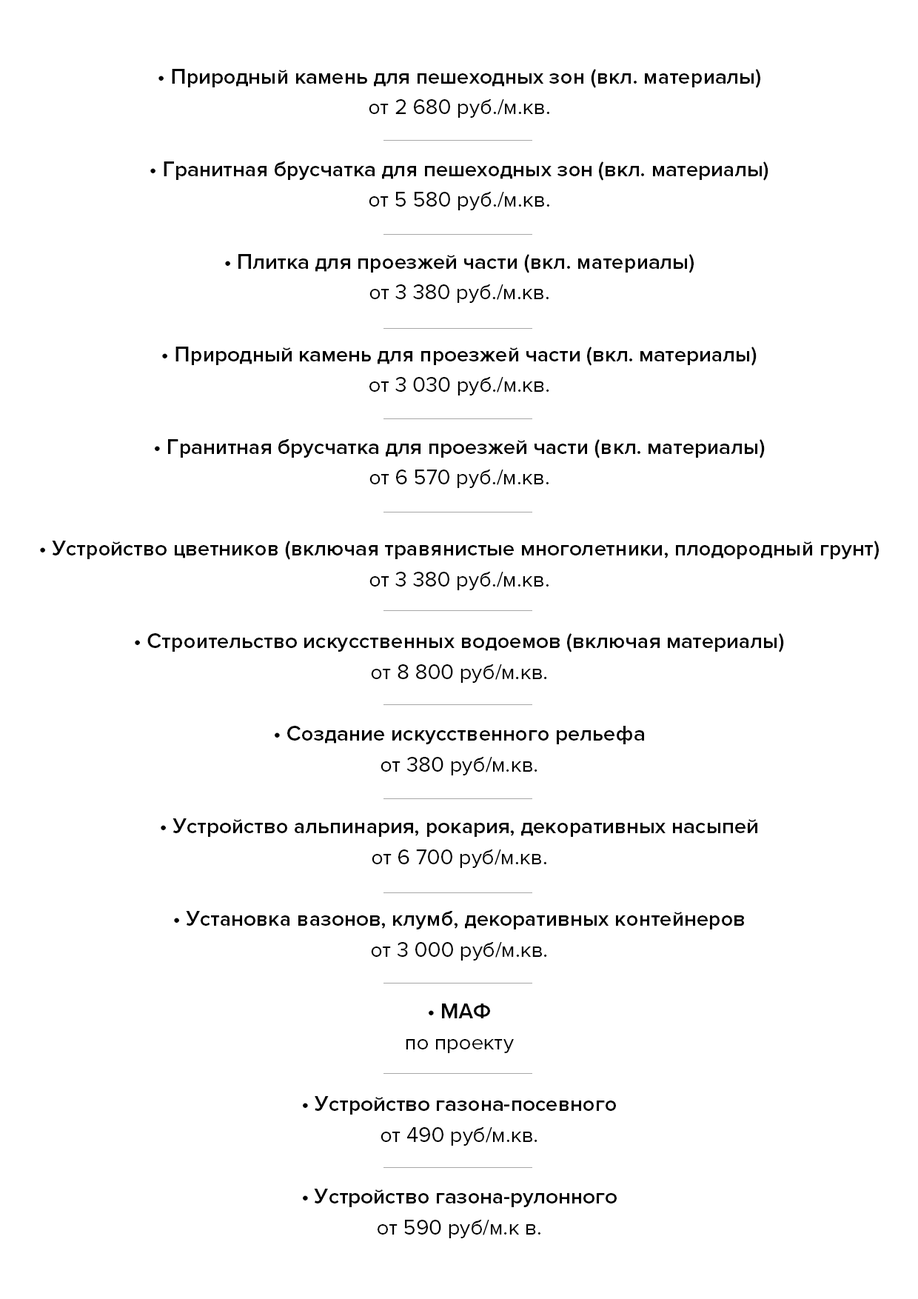
<style>
.page{position:relative;width:918px;height:1299px;background:#ffffff}
.page>*{position:absolute;margin:0}
.t1{font:21.6px/30.9px "ProximaNova-Semibold";color:#000000}
.t2{font:21.6px/30.9px "ProximaNova-Regular";color:#000000}
</style>
<div class="page">
<p class="t1" style="left:40px;top:541px;width:839px;height:697px;text-align:center">• Устройство цветников (включая травянистые многолетники, плодородный грунт)<br><span class="t2">от 3 380 руб./м.кв.<br><br></span>• Строительство искусственных водоемов (включая материалы)<br><span class="t2">от 8 800 руб/м.кв.<br><br></span>• Создание искусственного рельефа<br><span class="t2">от 380 руб/м.кв.<br><br></span>• Устройство альпинария, рокария, декоративных насыпей<br><span class="t2">от 6 700 руб/м.кв.<br><br></span>• Установка вазонов, клумб, декоративных контейнеров<br><span class="t2">от 3 000 руб/м.кв.<br><br></span>• МАФ<br><span class="t2">по проекту<br><br></span>• Устройство газона-посевного<br><span class="t2">от 490 руб/м.кв.<br><br></span>• Устройство газона-рулонного<br><span class="t2">от 590 руб/м.к в.<br><br></span>• Посадка деревьев и кустарников<br>(работа, посадочный грунт, удобрения, полив, гарантия 1 год)<br><span class="t2">посадка от 25% от стоимости растения<br>гарантия 1 год от 25% от стоимости растения<br><br></span>• Посадка кустарника (работа, посадочный грунт, удобрения, полив)<br><span class="t2">от 250 руб/шт.<br><br></span>• Обслуживание участка (после окончания озеленительных работ)<br><span class="t2">от 2370 руб/сотка в месяц</span></p>
</div>
